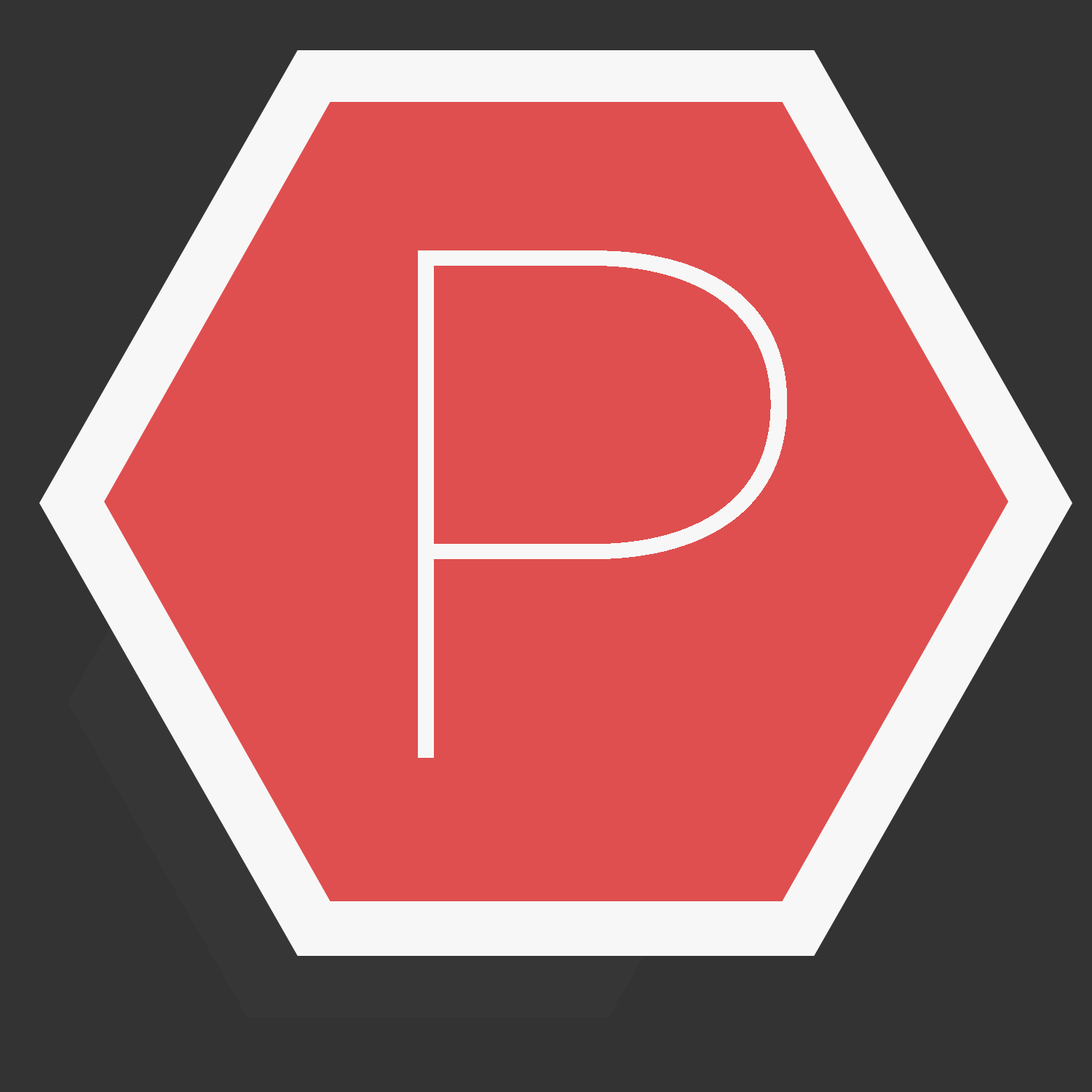
<style>
.page{position:relative;width:1092px;height:1092px;background:#df4f4f}
.page>*{position:absolute;margin:0}
.t1{font:723.7px "Gotham-Thin";color:#f7f7f7}
</style>
<div class="page">
<p class="t1" style="left:418px;top:250px;width:369px;height:508px">P</p>
</div>
